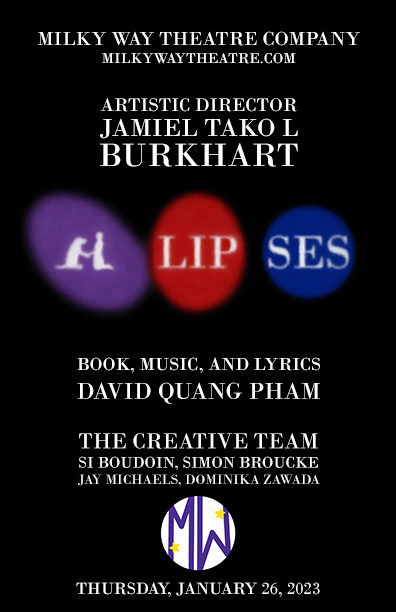
<style>
.page{position:relative;width:396px;height:612px;background:#000000}
.page>*{position:absolute;margin:0}
.t1{font:20px "BodoniMT";color:#ffffff}
.t2{font:15px "BodoniMT";color:#ffffff}
.t3{font:19px "BodoniMT";color:#ffffff}
.t4{font:26px/25px "BodoniMT";color:#ffffff}
.t5{font:34px/30px "BodoniMT";color:#ffffff}
.t6{font:18.4px "BodoniMT";color:#ffffff}
.t7{font:24px "BodoniMT";color:#ffffff}
.t8{font:13.8px "BodoniMT";color:#ffffff}
.t9{font:22.4px "BodoniMT";color:#ffffff}
.t10{font:16px "BodoniMT";color:#ffffff}
.t11{font:17px "BodoniMT";color:#ffffff}
</style>
<div class="page">
<p class="t1" style="left:38px;top:31px;width:322px;height:33px;text-align:center">MILKY WAY THEATRE COMPANY<br><span class="t2">MILKYWAYTHEATRE.COM</span></p>
<p class="t3" style="left:100px;top:98px;width:198px;height:69px;text-align:center">ARTISTIC DIRECTOR<br><span class="t4">JAMIEL TAKO L<br></span><span class="t5">BURKHART</span></p>
<p class="t6" style="left:77px;top:357px;width:243px;height:47px;text-align:center">BOOK, MUSIC, AND LYRICS<br><span class="t7">DAVID QUANG PHAM</span></p>
<p class="t8" style="left:78px;top:433px;width:242px;height:53px;text-align:center"><span class="t9">THE CREATIVE TEAM<br></span><span class="t10">SI BOUDOIN, SIMON BROUCKE<br></span>JAY MICHAELS, DOMINIKA ZAWADA</p>
<p class="t11" style="left:76px;top:582px;width:244px;height:15px">THURSDAY, JANUARY 26, 2023</p>
</div>
